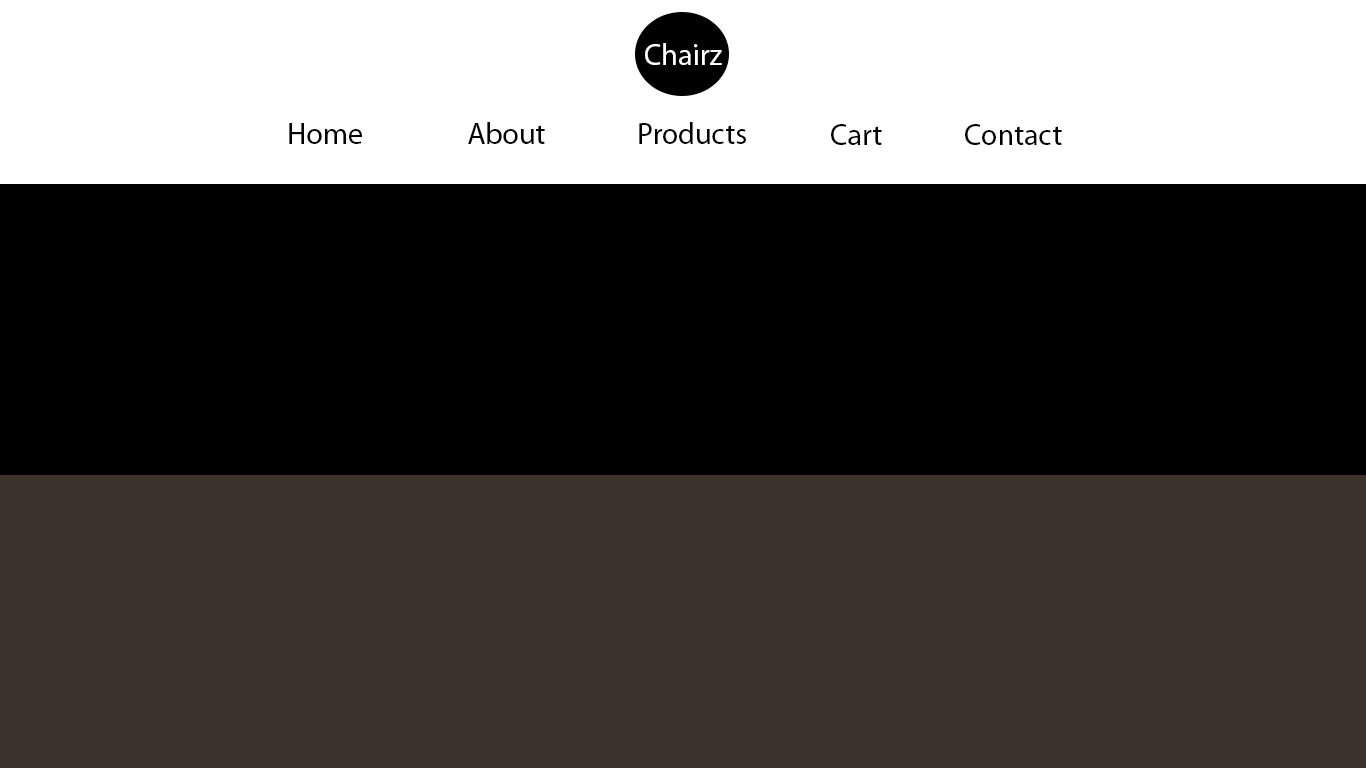
<style>
.page{position:relative;width:1366px;height:768px;background:#000000}
.page>*{position:absolute;margin:0}
.t1{font:30px "MyriadPro-Regular";color:#ffffff}
.t2{font:30px "MyriadPro-Regular";color:#000000}
</style>
<div class="page">
<p class="t1" style="left:645px;top:43px;width:77px;height:22px">Chairz</p>
<p class="t2" style="left:289px;top:123px;width:73px;height:21px">Home</p>
<p class="t2" style="left:468px;top:122px;width:77px;height:22px">About</p>
<p class="t2" style="left:639px;top:122px;width:107px;height:22px">Products</p>
<p class="t2" style="left:831px;top:124px;width:51px;height:21px">Cart</p>
<p class="t2" style="left:965px;top:124px;width:97px;height:21px">Contact</p>
</div>
